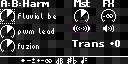
<style>
.page{position:relative;width:128px;height:64px}
.page>*{position:absolute;margin:0}
.t1{font:15px "MatchupPro";color:#ffffff}
.t2{font:15px "Eighties";color:#ffffff}
</style>
<div class="page">
<p class="t1" style="left:1px;top:0px;width:48px;height:7px">A:B:Harm</p>
<p class="t1" style="left:74px;top:0px;width:16px;height:7px">Mst</p>
<p class="t1" style="left:103px;top:0px;width:11px;height:7px">FX</p>
<p class="t2" style="left:18px;top:13px;width:38px;height:6px">Fluvial be</p>
<p class="t2" style="left:18px;top:28px;width:36px;height:7px">pwm lead</p>
<p class="t1" style="left:72px;top:40px;width:48px;height:7px">Trans +0</p>
<p class="t2" style="left:18px;top:43px;width:21px;height:6px">fuzion</p>
<p class="t1" style="left:21px;top:59px;width:10px;height:3px">+-</p>
</div>
